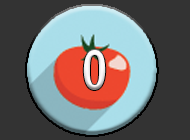
<style>
.page{position:relative;width:190px;height:140px;background:#333333}
.page>*{position:absolute;margin:0}
.t1{font:62.5px "MyriadPro-BoldCond"}
</style>
<div class="page">
<p class="t1" style="left:82px;top:49px;width:25px;height:42px">0</p>
</div>
